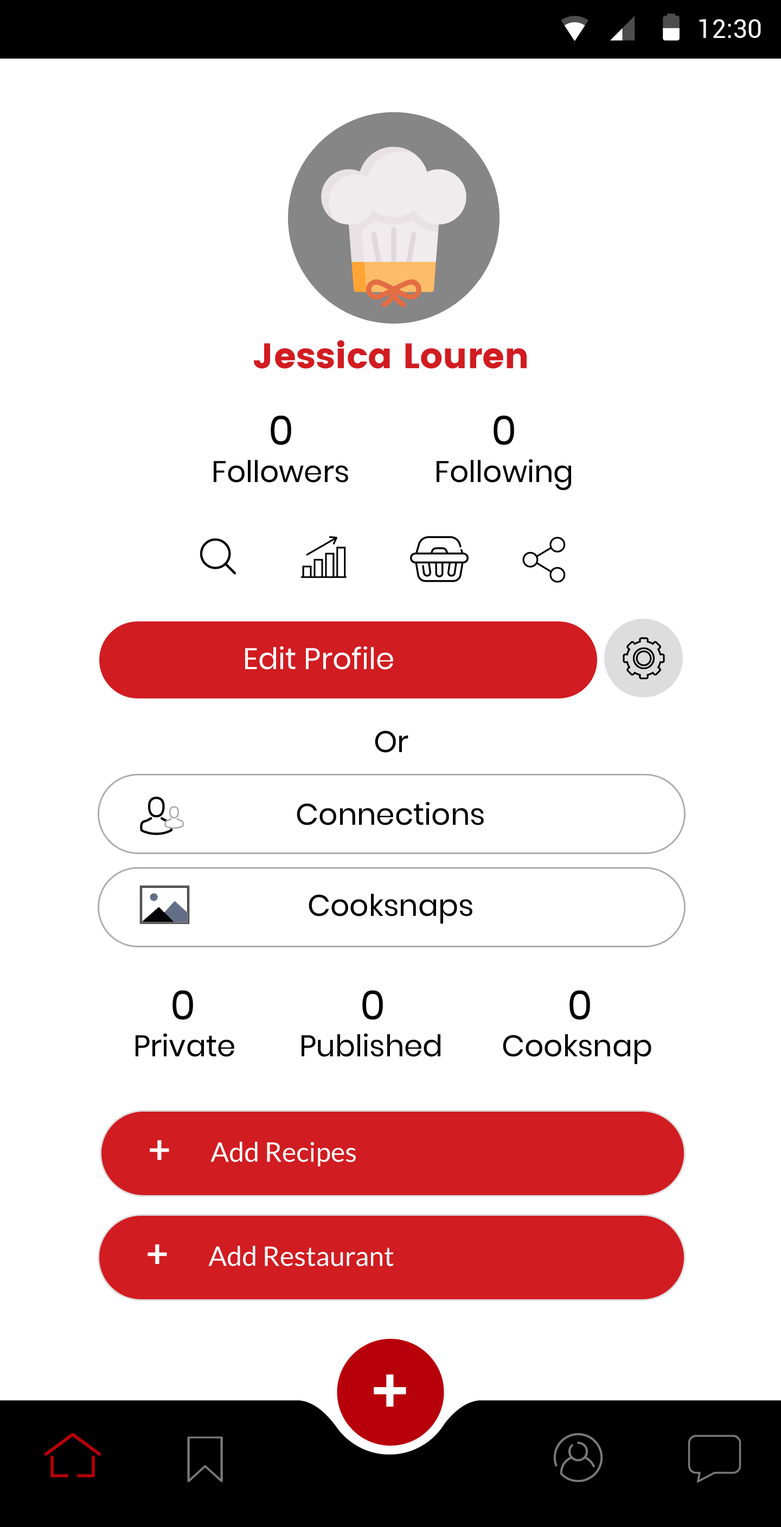
<style>
.page{position:relative;width:781px;height:1527px;background:#ffffff}
.page>*{position:absolute;margin:0}
.t1{font:26px "Roboto-Regular";color:#ffffff}
.t2{font:35.2px "Poppins";color:#d11c21}
.t3{font:40.7px "Poppins-Regular";color:#000000}
.t4{font:29.8px "Poppins-Regular";color:#000000}
.t5{font:29.8px "Poppins-Regular";color:#ffffff}
.t6{font:39px "Lato-Bold";color:#ffffff}
.t7{font:27.1px "Lato-Regular";color:#ffffff}
.t8{font:66.1px "OpenSans-Bold";color:#ffffff;text-transform:uppercase}
</style>
<div class="page">
<p class="t1" style="left:699px;top:19px;width:62px;height:19px">12:30</p>
<p class="t2" style="left:254px;top:340px;width:273px;height:29px">Jessica Louren</p>
<p class="t3" style="left:271px;top:415px;width:20px;height:30px">0</p>
<p class="t3" style="left:493px;top:415px;width:21px;height:30px">0</p>
<p class="t4" style="left:214px;top:460px;width:134px;height:23px">Followers</p>
<p class="t4" style="left:437px;top:459px;width:134px;height:31px">Following</p>
<p class="t5" style="left:245px;top:646px;width:148px;height:24px">Edit Profile</p>
<p class="t4" style="left:375px;top:730px;width:33px;height:23px">Or</p>
<p class="t4" style="left:297px;top:801px;width:187px;height:24px">Connections</p>
<p class="t4" style="left:309px;top:894px;width:163px;height:30px">Cooksnaps</p>
<p class="t3" style="left:172px;top:990px;width:21px;height:30px">0</p>
<p class="t3" style="left:362px;top:990px;width:21px;height:30px">0</p>
<p class="t3" style="left:569px;top:990px;width:21px;height:30px">0</p>
<p class="t4" style="left:136px;top:1033px;width:98px;height:24px">Private</p>
<p class="t4" style="left:302px;top:1033px;width:138px;height:24px">Published</p>
<p class="t4" style="left:503px;top:1034px;width:148px;height:30px">Cooksnap</p>
<p class="t6" style="left:150px;top:1140px;width:19px;height:20px">+</p>
<p class="t7" style="left:210px;top:1141px;width:146px;height:25px">Add Recipes</p>
<p class="t6" style="left:147px;top:1244px;width:20px;height:20px">+</p>
<p class="t7" style="left:208px;top:1246px;width:186px;height:20px">Add Restaurant</p>
<p class="t8" style="left:374px;top:1374px;width:32px;height:33px">+</p>
</div>
